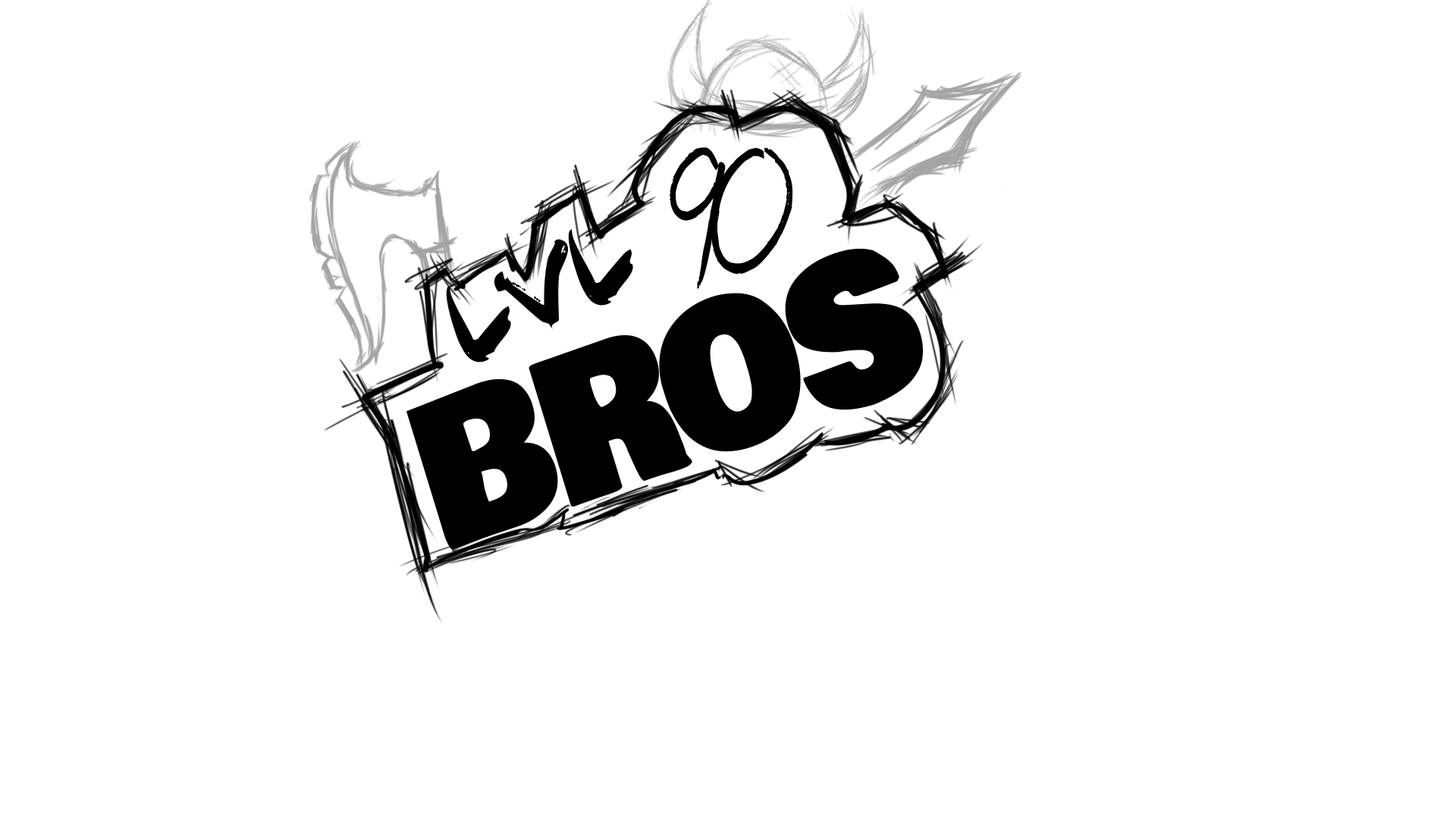
<style>
.page{position:relative;width:1456px;height:819px;background:#ffffff}
.page>*{position:absolute;margin:0}
.t1{font:251.7px "Beauty";letter-spacing:-0.05em;color:#000000;scale:0.69 1}
.t2{font:97.4px "FightKid";letter-spacing:-0.05em;color:#000000;scale:1.07 1}
.t3{font:197.5px "BowlbyOneSC-Regular";letter-spacing:-0.05em;color:#000000;scale:0.91 1}
</style>
<div class="page">
<p class="t1" style="left:670px;top:147px;width:123px;height:142px">90</p>
<p class="t2" style="left:446px;top:229px;width:187px;height:133px;rotate:-25deg">LVL</p>
<p class="t3" style="left:406px;top:248px;width:517px;height:303px;rotate:-19deg">BROS</p>
</div>
